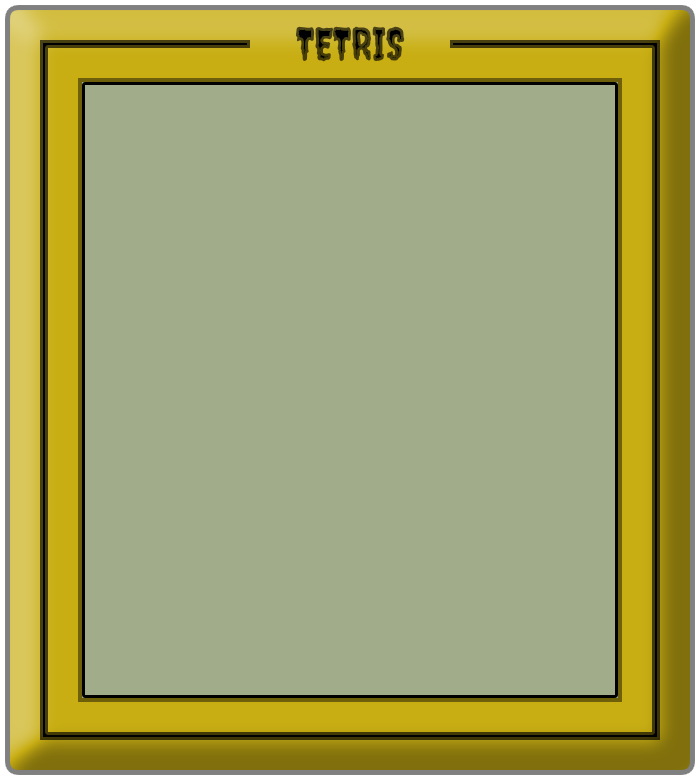
<style>
.page{position:relative;width:700px;height:780px;background:#a0ac8a}
.page>*{position:absolute;margin:0}
.t1{font:45px "Creepster-Regular"}
</style>
<div class="page">
<p class="t1" style="left:295px;top:26px;width:110px;height:36px">TETRIS</p>
</div>
